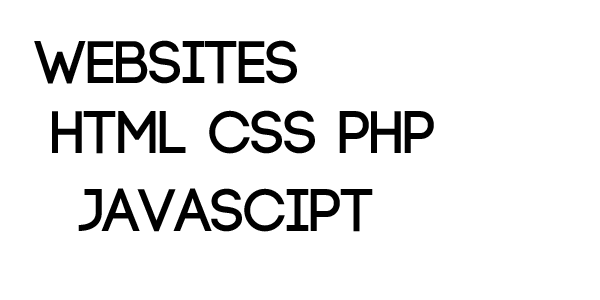
<style>
.page{position:relative;width:600px;height:300px;background:#ffffff}
.page>*{position:absolute;margin:0}
.t1{font:60px "Code-Bold";color:#000000}
</style>
<div class="page">
<p class="t1" style="left:34px;top:40px;width:263px;height:44px">WEBSITES</p>
<p class="t1" style="left:52px;top:110px;width:382px;height:44px">HTML CSS PHP</p>
<p class="t1" style="left:78px;top:188px;width:295px;height:44px">JAVASCIPT</p>
</div>
